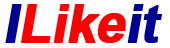
<style>
.page{position:relative;width:170px;height:48px;background:#ffffff}
.page>*{position:absolute;margin:0}
.t1{font:53.3px "Arial-BoldMT";letter-spacing:-0.025em;color:#ff0000;font-weight:bold;font-style:italic}
.t2{font:53.3px "Arial-BoldMT";letter-spacing:-0.025em;color:#000092;font-weight:bold;font-style:italic}
</style>
<div class="page">
<p class="t1" style="left:5px;top:4px;width:157px;height:39px"><span class="t2">I</span>Like<span class="t2">it</span></p>
</div>
